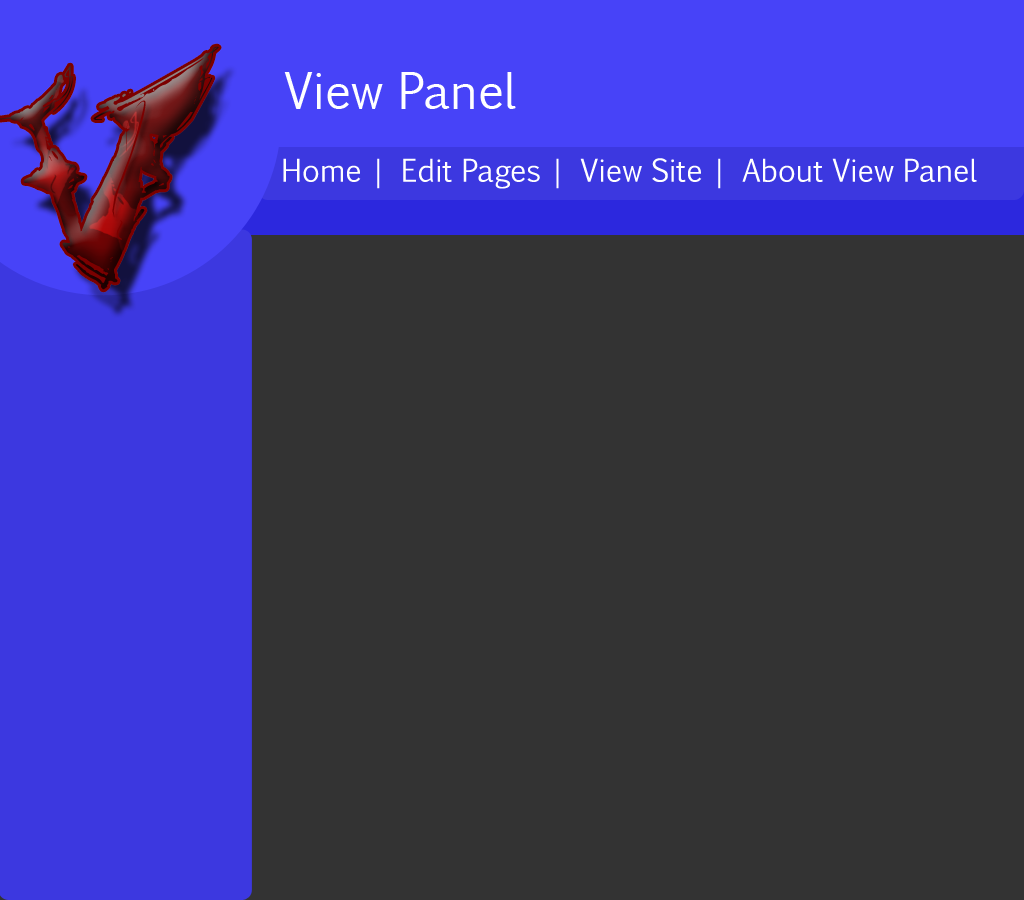
<style>
.page{position:relative;width:1024px;height:900px;background:#333333}
.page>*{position:absolute;margin:0}
.t1{font:220px "VTKSROCKGARAGEBAND"}
.t2{font:48px "EuphemiaCAS";color:#ffffff}
.t3{font:30px "EuphemiaCAS";color:#ffffff}
</style>
<div class="page">
<p class="t1" style="left:0px;top:46px;width:219px;height:244px">V</p>
<p class="t2" style="left:284px;top:72px;width:232px;height:37px">View Panel</p>
<p class="t3" style="left:283px;top:158px;width:694px;height:31px">Home | Edit Pages | View Site | About View Panel</p>
</div>
